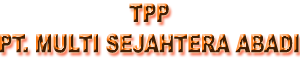
<style>
.page{position:relative;width:300px;height:60px;background:#ffffff}
.page>*{position:absolute;margin:0}
.t1{font:25.4px "Arial-Black";scale:0.73 1}
</style>
<div class="page">
<p class="t1" style="left:0px;top:3px;width:299px;height:50px;text-align:center">TPP<br>PT. MULTI SEJAHTERA ABADI</p>
</div>
